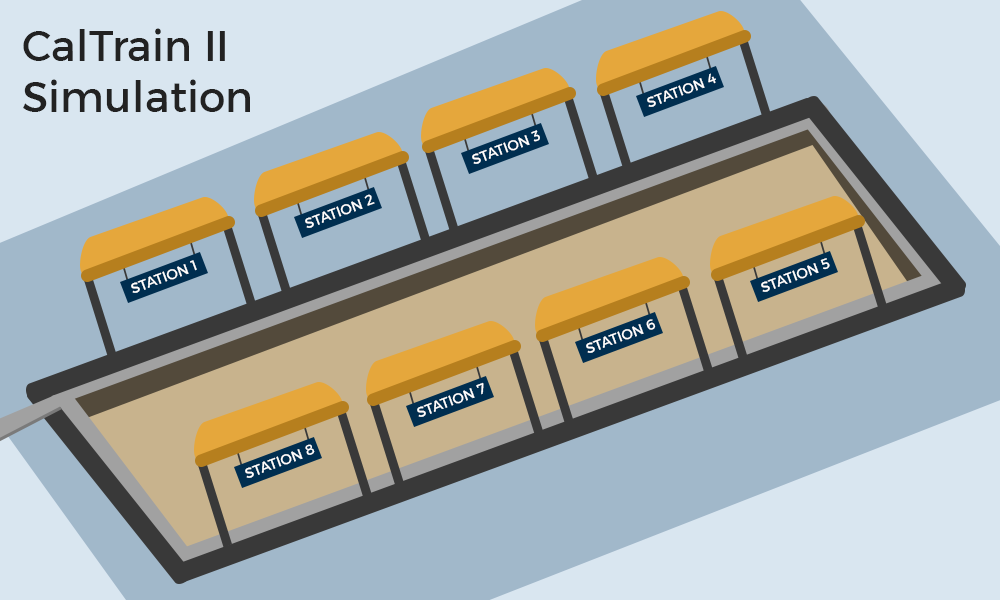
<style>
.page{position:relative;width:1000px;height:600px;background:#a1b8ca}
.page>*{position:absolute;margin:0}
.t1{font:42.5px "Montserrat-Regular";color:#222222}
.t2{font:14.2px "Montserrat-Regular";color:#ffffff;text-transform:uppercase}
</style>
<div class="page">
<p class="t1" style="left:23px;top:28px;width:227px;height:84px">CalTrain II<br>Simulation</p>
<p class="t2" style="left:647px;top:73px;width:69px;height:34px;rotate:-20deg">station 4</p>
<p class="t2" style="left:472px;top:130px;width:68px;height:34px;rotate:-20deg">station 3</p>
<p class="t2" style="left:305px;top:194px;width:70px;height:34px;rotate:-20deg">station 2</p>
<p class="t2" style="left:131px;top:260px;width:66px;height:33px;rotate:-20deg">station 1</p>
<p class="t2" style="left:761px;top:258px;width:69px;height:34px;rotate:-20deg">station 5</p>
<p class="t2" style="left:586px;top:319px;width:70px;height:34px;rotate:-20deg">station 6</p>
<p class="t2" style="left:417px;top:382px;width:67px;height:35px;rotate:-20deg">station 7</p>
<p class="t2" style="left:245px;top:444px;width:70px;height:34px;rotate:-20deg">station 8</p>
</div>
